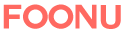
<style>
.page{position:relative;width:125px;height:32px;background:#ffffff}
.page>*{position:absolute;margin:0}
.t1{font:33px "COUTURE-Bold";color:#ff6961}
</style>
<div class="page">
<p class="t1" style="left:3px;top:4px;width:118px;height:25px">foonu</p>
</div>
